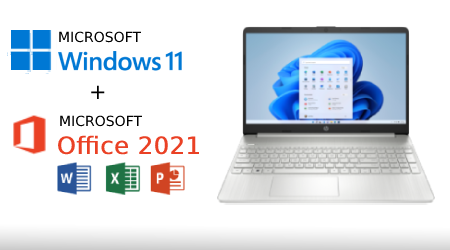
<style>
.page{position:relative;width:450px;height:250px;background:#ffffff}
.page>*{position:absolute;margin:0}
.t1{font:14px "DejaVuSans";color:#000000}
.t2{font:21px "DejaVuSans";color:#000000}
.t3{font:24px "DejaVuSans";color:#ea4125;font-weight:bold}
</style>
<div class="page">
<p class="t1" style="left:59px;top:31px;width:83px;height:12px">MICROSOFT</p>
<p class="t2" style="left:91px;top:85px;width:14px;height:14px">+</p>
<p class="t1" style="left:60px;top:115px;width:83px;height:12px">MICROSOFT</p>
<p class="t3" style="left:58px;top:135px;width:142px;height:20px">Office 2021</p>
</div>
